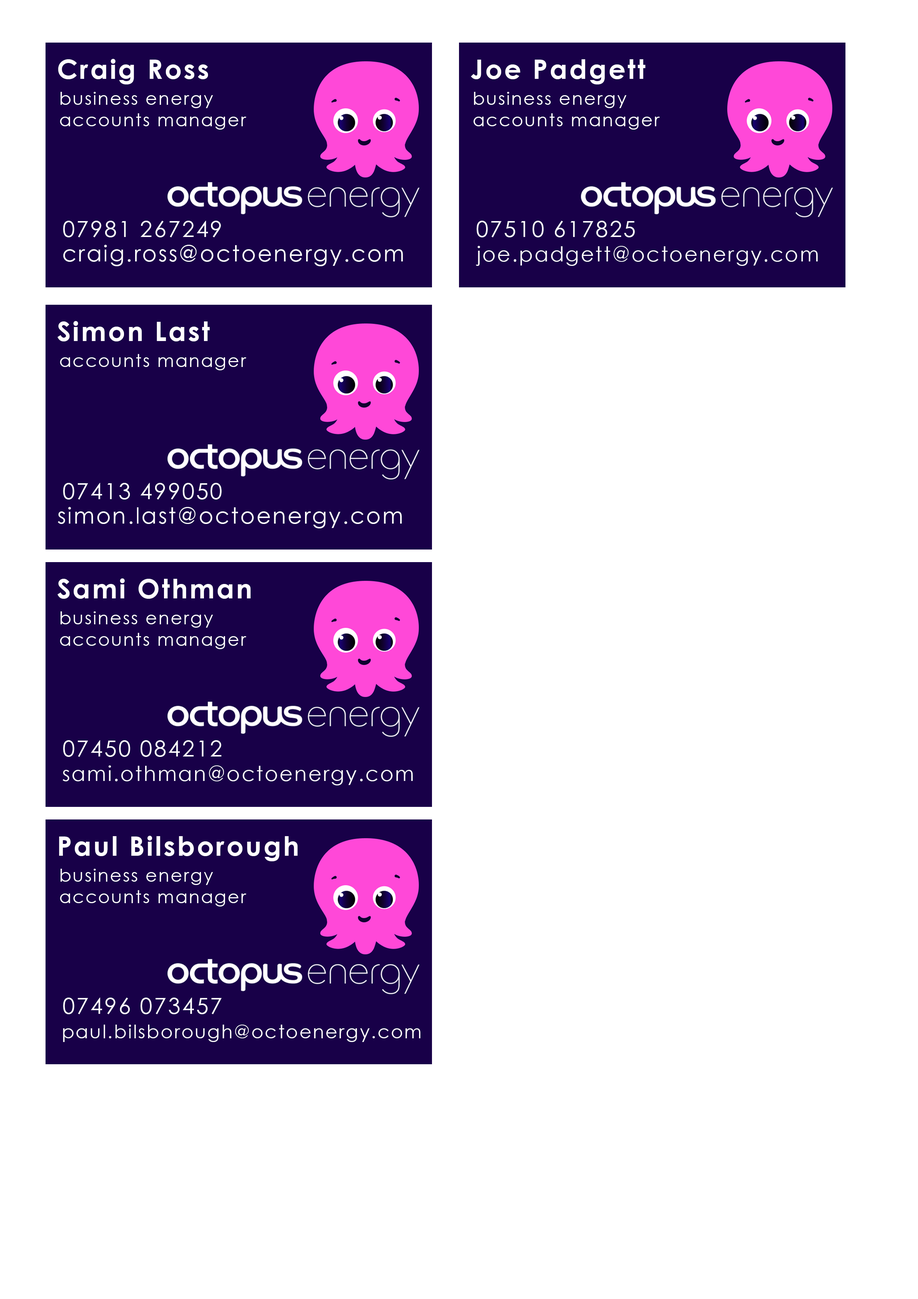
<style>
.page{position:relative;width:918px;height:1299px;background:#ffffff}
.page>*{position:absolute;margin:0}
.t1{font:26.7px "CenturyGothic-Bold";letter-spacing:0.075em;color:#ffffff}
.t2{font:17.8px "CenturyGothic";letter-spacing:0.075em;color:#ffffff}
.t3{font:22.2px "CenturyGothic";letter-spacing:0.075em;color:#ffffff;text-transform:uppercase}
.t4{font:22.2px "CenturyGothic";letter-spacing:0.075em;color:#ffffff}
.t5{font:20.4px "CenturyGothic";letter-spacing:0.075em;color:#ffffff}
.t6{font:18.5px "CenturyGothic";letter-spacing:0.075em;color:#ffffff}
</style>
<div class="page">
<p class="t1" style="left:58px;top:59px;width:150px;height:25px">Craig Ross</p>
<p class="t1" style="left:471px;top:59px;width:175px;height:25px">Joe Padgett</p>
<p class="t2" style="left:60px;top:92px;width:187px;height:38px">business energy<br>accounts manager</p>
<p class="t2" style="left:474px;top:92px;width:186px;height:38px">business energy<br>accounts manager</p>
<p class="t3" style="left:63px;top:221px;width:158px;height:16px">07981 267249</p>
<p class="t3" style="left:476px;top:221px;width:159px;height:16px">07510 617825</p>
<p class="t4" style="left:63px;top:245px;width:340px;height:21px">craig.ross@octoenergy.com</p>
<p class="t5" style="left:476px;top:246px;width:342px;height:20px">joe.padgett@octoenergy.com</p>
<p class="t1" style="left:57px;top:321px;width:153px;height:20px">Simon Last</p>
<p class="t2" style="left:60px;top:354px;width:187px;height:16px">accounts manager</p>
<p class="t3" style="left:63px;top:483px;width:159px;height:16px">07413 499050</p>
<p class="t4" style="left:58px;top:507px;width:344px;height:21px">simon.last@octoenergy.com</p>
<p class="t1" style="left:57px;top:578px;width:194px;height:21px">Sami Othman</p>
<p class="t2" style="left:60px;top:611px;width:187px;height:38px">business energy<br>accounts manager</p>
<p class="t3" style="left:63px;top:740px;width:158px;height:17px">07450 084212</p>
<p class="t5" style="left:63px;top:765px;width:350px;height:20px">sami.othman@octoenergy.com</p>
<p class="t1" style="left:59px;top:836px;width:239px;height:25px">Paul Bilsborough</p>
<p class="t2" style="left:60px;top:869px;width:187px;height:37px">business energy<br>accounts manager</p>
<p class="t3" style="left:63px;top:997px;width:159px;height:17px">07496 073457</p>
<p class="t6" style="left:63px;top:1024px;width:358px;height:18px">paul.bilsborough@octoenergy.com</p>
</div>
